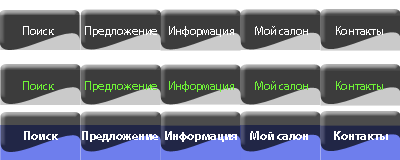
<style>
.page{position:relative;width:400px;height:160px;background:#3c3c3c}
.page>*{position:absolute;margin:0}
.t1{font:12px "MyriadPro-Regular";color:#ffffff}
.t2{font:12px "MyriadPro-Regular";color:#6ff536}
.t3{font:12px "MyriadPro-Bold";color:#ffffff}
</style>
<div class="page">
<p class="t1" style="left:23px;top:26px;width:31px;height:9px">Поиск</p>
<p class="t1" style="left:85px;top:26px;width:72px;height:11px">Предложение</p>
<p class="t1" style="left:169px;top:26px;width:65px;height:11px">Информация</p>
<p class="t1" style="left:255px;top:26px;width:53px;height:9px">Мой салон</p>
<p class="t1" style="left:336px;top:26px;width:47px;height:9px">Контакты</p>
<p class="t2" style="left:23px;top:81px;width:31px;height:9px">Поиск</p>
<p class="t2" style="left:85px;top:81px;width:72px;height:11px">Предложение</p>
<p class="t2" style="left:169px;top:81px;width:65px;height:11px">Информация</p>
<p class="t2" style="left:255px;top:81px;width:53px;height:9px">Мой салон</p>
<p class="t2" style="left:336px;top:81px;width:47px;height:9px">Контакты</p>
<p class="t3" style="left:24px;top:131px;width:34px;height:9px">Поиск</p>
<p class="t3" style="left:82px;top:131px;width:76px;height:11px">Предложение</p>
<p class="t3" style="left:165px;top:131px;width:72px;height:11px">Информация</p>
<p class="t3" style="left:250px;top:131px;width:58px;height:9px">Мой салон</p>
<p class="t3" style="left:334px;top:131px;width:54px;height:9px">Контакты</p>
</div>
